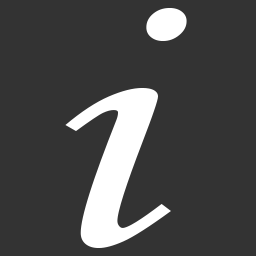
<style>
.page{position:relative;width:256px;height:256px;background:#333333}
.page>*{position:absolute;margin:0}
.t1{font:378px "MonotypeCorsiva";color:#ffffff;scale:1.29 1}
</style>
<div class="page">
<p class="t1" style="left:65px;top:8px;width:122px;height:240px">i</p>
</div>
